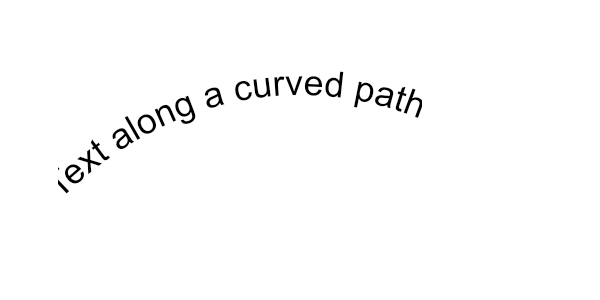
<style>
.page{position:relative;width:600px;height:300px;background:#ffffff}
.page>*{position:absolute;margin:0}
.t1{font:36px "ArialMT";color:#000000}
</style>
<div class="page">
<p class="t1" style="left:58px;top:71px;width:364px;height:123px">Text along a curved path</p>
</div>
